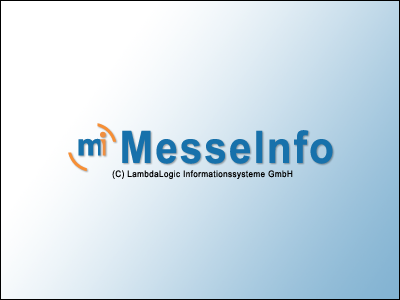
<style>
.page{position:relative;width:400px;height:300px}
.page>*{position:absolute;margin:0}
.t1{font:45px "Arial-BoldMT";letter-spacing:0.05em;color:#1771ab;scale:0.9 1}
.t2{font:9px "ArialMT";letter-spacing:0.05em;color:#000000;scale:0.9 1}
</style>
<div class="page">
<p class="t1" style="left:122px;top:130px;width:211px;height:34px">MesseInfo</p>
<p class="t2" style="left:112px;top:170px;width:181px;height:9px">(C) LambdaLogic Informationssysteme GmbH</p>
</div>
